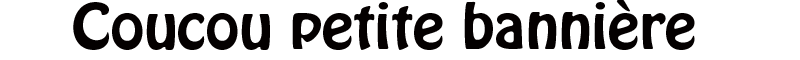
<style>
.page{position:relative;width:800px;height:60px;background:#ffffff}
.page>*{position:absolute;margin:0}
.t1{font:55px "HoboStd";color:#040000;scale:1.09 1}
</style>
<div class="page">
<p class="t1" style="left:73px;top:0px;width:622px;height:50px">Coucou petite bannière</p>
</div>
